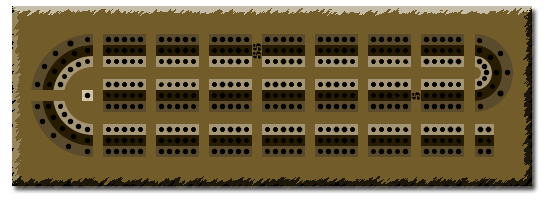
<style>
.page{position:relative;width:550px;height:200px;background:#725c29}
.page>*{position:absolute;margin:0}
.t1{font:10px "Ravie";color:#000000}
</style>
<div class="page">
<p class="t1" style="left:252px;top:43px;width:10px;height:16px;rotate:-90deg">SS</p>
<p class="t1" style="left:411px;top:92px;width:10px;height:8px;rotate:-90deg">S</p>
</div>
